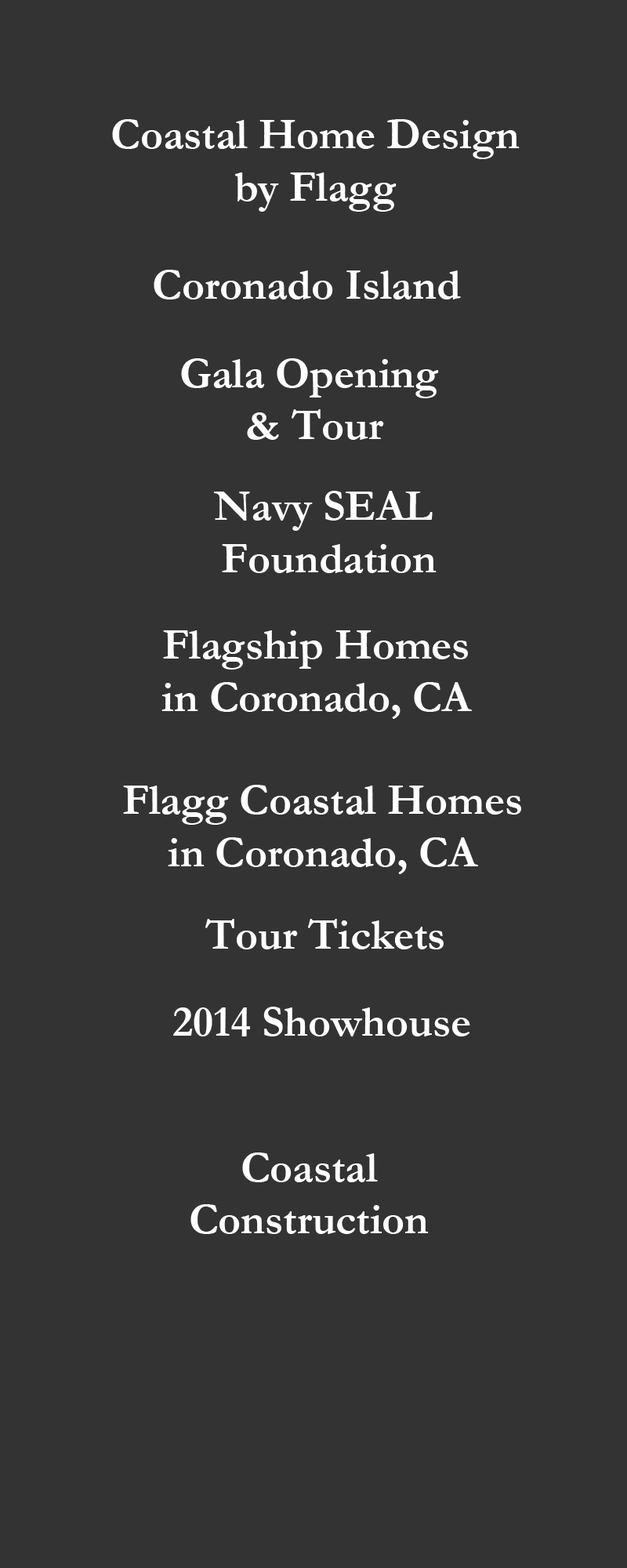
<style>
.page{position:relative;width:627px;height:1568px;background:#333333}
.page>*{position:absolute;margin:0}
.t1{font:43.6px "Garamond-Bold";color:#ffffff}
</style>
<div class="page">
<p class="t1" style="left:112px;top:119px;width:408px;height:93px;text-align:center">Coastal Home Design<br>by Flagg</p>
<p class="t1" style="left:154px;top:270px;width:307px;height:29px">Coronado Island</p>
<p class="t1" style="left:181px;top:358px;width:258px;height:82px;text-align:center">Gala Opening <br>&amp; Tour</p>
<p class="t1" style="left:214px;top:491px;width:223px;height:82px;text-align:center">Navy SEAL <br>Foundation</p>
<p class="t1" style="left:162px;top:630px;width:310px;height:89px;text-align:center">Flagship Homes<br>in Coronado, CA</p>
<p class="t1" style="left:123px;top:785px;width:398px;height:89px;text-align:center">Flagg Coastal Homes<br>in Coronado, CA</p>
<p class="t1" style="left:205px;top:919px;width:239px;height:30px">Tour Tickets</p>
<p class="t1" style="left:173px;top:1007px;width:297px;height:29px">2014 Showhouse</p>
<p class="t1" style="left:191px;top:1152px;width:238px;height:82px;text-align:center">Coastal<br>Construction</p>
</div>
